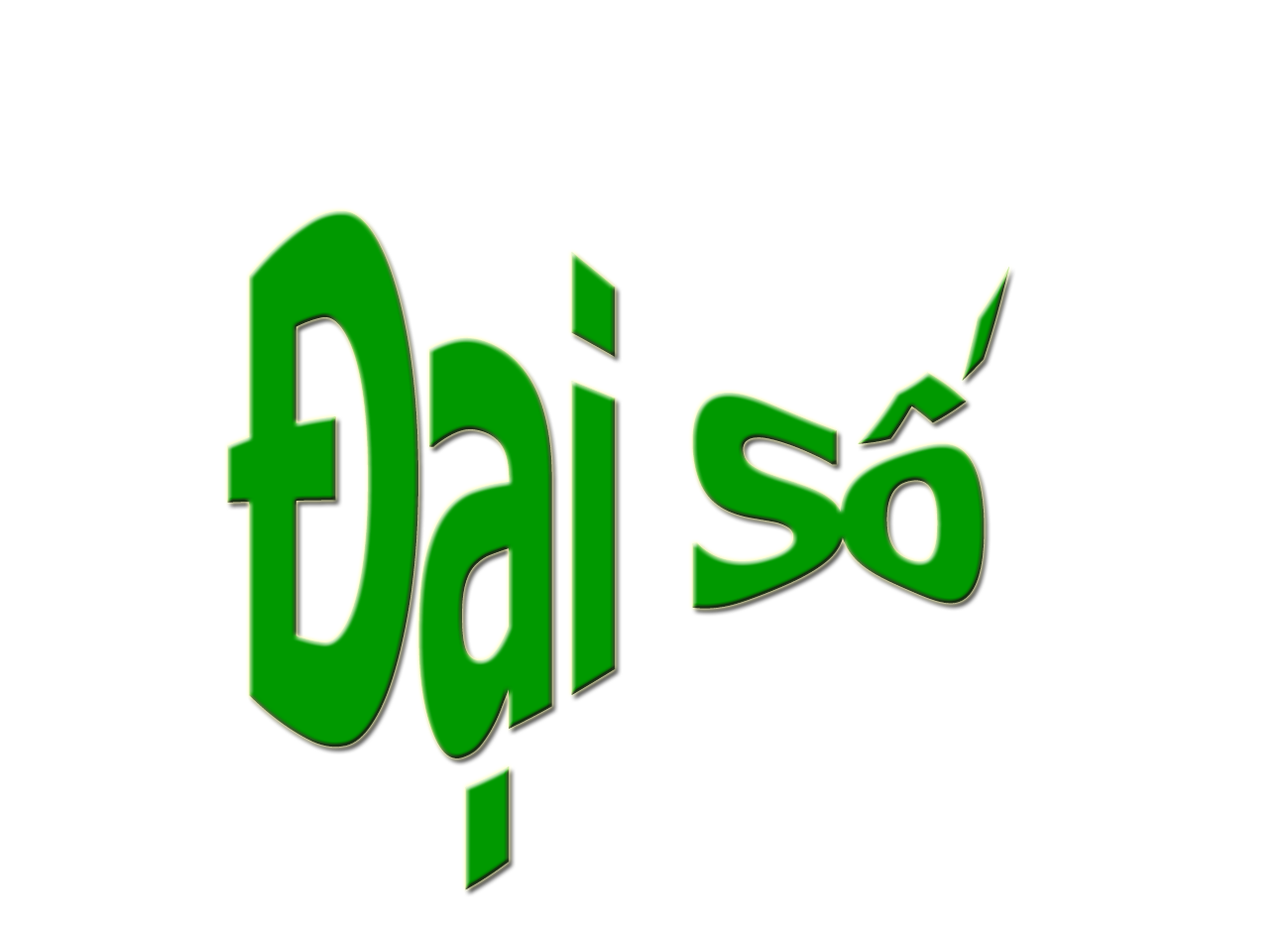
<style>
.page{position:relative;width:1285px;height:928px;background:#ffffff}
.page>*{position:absolute;margin:0}
.t1{font:494.2px "Tahoma-Bold";letter-spacing:-0.05em;color:#009900;scale:0.52 1}
</style>
<div class="page">
<p class="t1" style="left:227px;top:210px;width:782px;height:680px">Đại Số</p>
</div>
